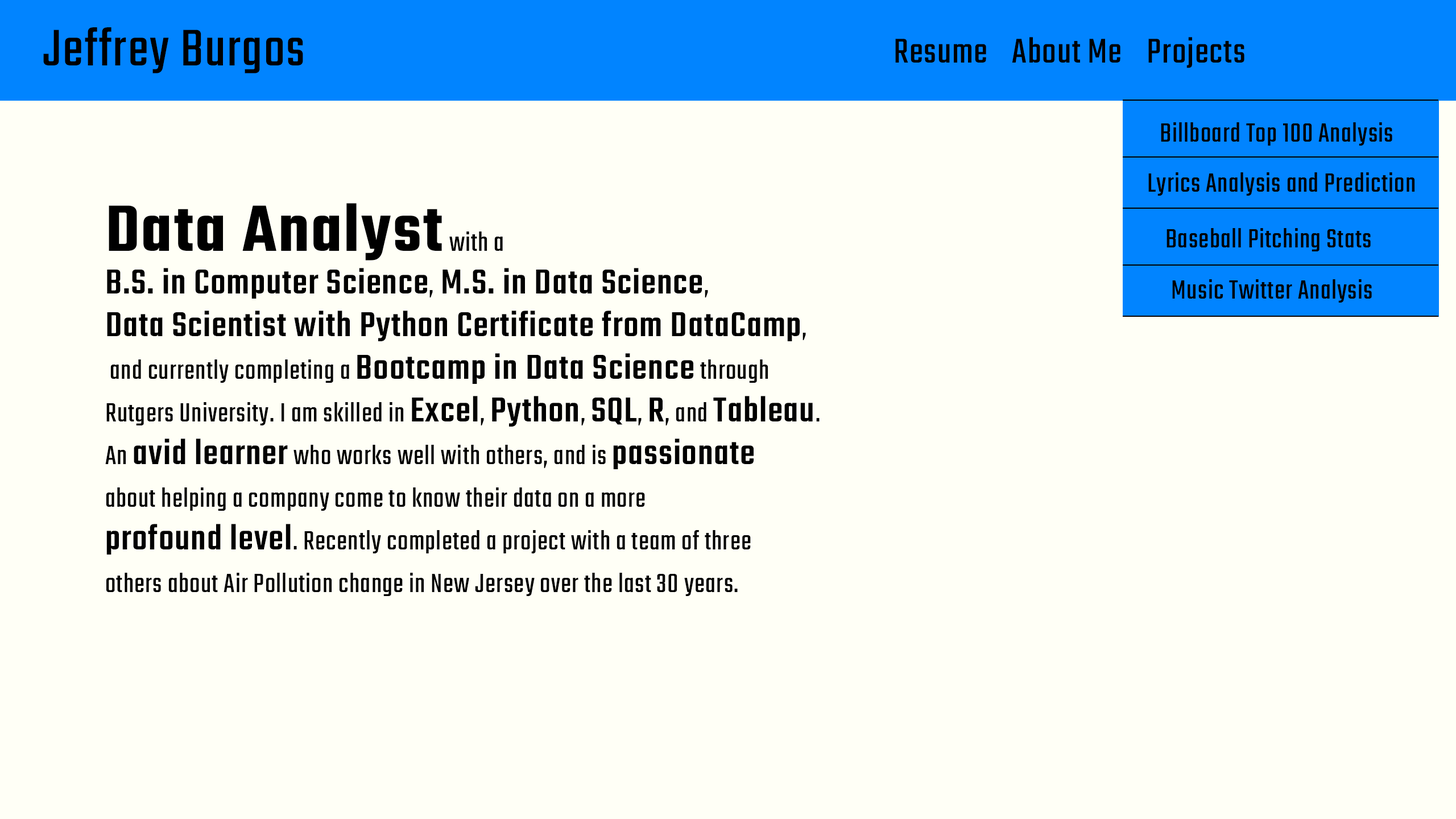
<style>
.page{position:relative;width:1456px;height:819px;background:#fffff6}
.page>*{position:absolute;margin:0}
.t1{font:56.9px "Teko-Regular";letter-spacing:0.025em;color:#000000}
.t2{font:37.9px "Teko-Regular";letter-spacing:0.025em;color:#000000}
.t3{font:28.4px "Teko-Regular";letter-spacing:0.025em;color:#000000}
.t4{font:28.4px/42.7px "Teko-Regular";letter-spacing:0.025em;color:#000000}
.t5{font:71.1px/42.7px "Teko-Semibold";letter-spacing:0.025em;color:#000000}
.t6{font:37.9px/42.7px "Teko-Medium";letter-spacing:0.025em;color:#000000}
</style>
<div class="page">
<p class="t1" style="left:43px;top:27px;width:260px;height:46px">Jeffrey Burgos</p>
<p class="t2" style="left:895px;top:39px;width:91px;height:24px">Resume</p>
<p class="t2" style="left:1012px;top:37px;width:108px;height:26px">About Me</p>
<p class="t2" style="left:1148px;top:37px;width:96px;height:31px">Projects</p>
<p class="t3" style="left:1161px;top:122px;width:231px;height:24px">Billboard Top 100 Analysis</p>
<p class="t3" style="left:1148px;top:172px;width:267px;height:24px">Lyrics Analysis and Prediction</p>
<p class="t4" style="left:105px;top:203px;width:715px;height:393px"><span class="t5">Data Analyst</span> with a <br><span class="t6">B.S. in Computer Science</span>, <span class="t6">M.S. in Data Science</span>, <br><span class="t6">Data Scientist with Python Certificate from DataCamp</span>,<br> and currently completing a <span class="t6">Bootcamp in Data Science</span> through <br>Rutgers University. I am skilled in <span class="t6">Excel</span>, <span class="t6">Python</span>, <span class="t6">SQL</span>, <span class="t6">R</span>, and <span class="t6">Tableau</span>. <br>An <span class="t6">avid learner</span> who works well with others, and is <span class="t6">passionate <br></span>about helping a company come to know their data on a more <br><span class="t6">profound level</span>. Recently completed a project with a team of three <br>others about Air Pollution change in New Jersey over the last 30 years.</p>
<p class="t3" style="left:1166px;top:228px;width:205px;height:23px">Baseball Pitching Stats</p>
<p class="t3" style="left:1172px;top:279px;width:200px;height:24px">Music Twitter Analysis</p>
</div>
